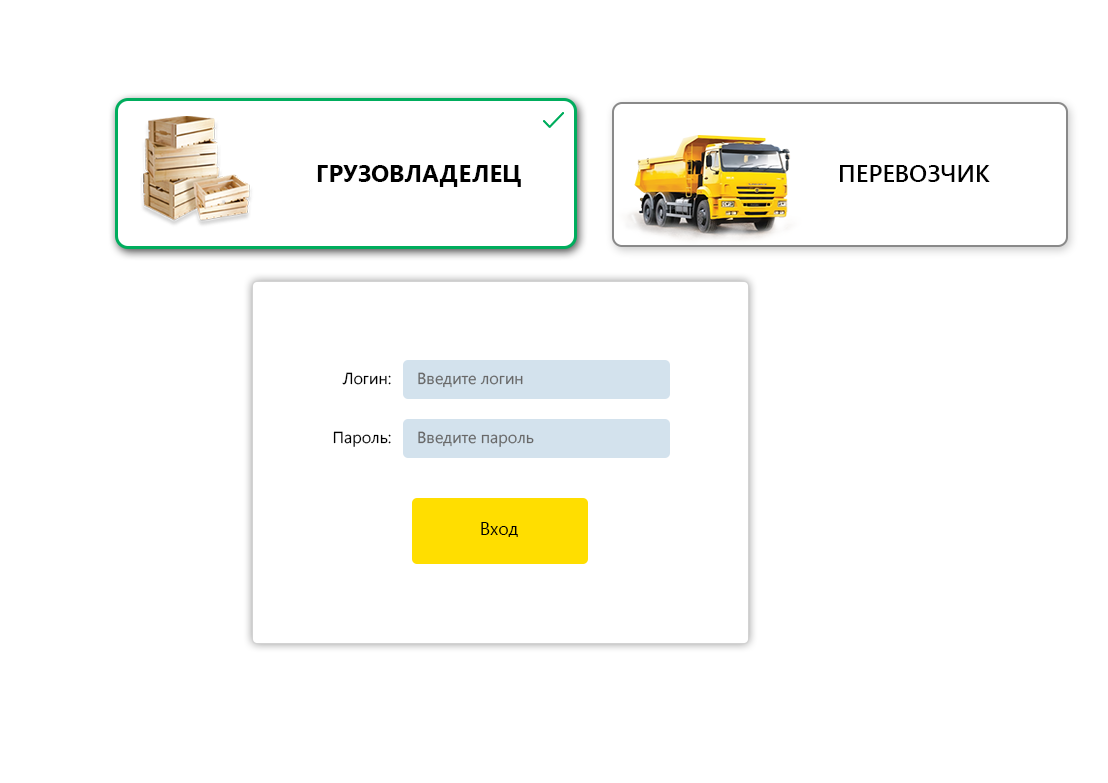
<style>
.page{position:relative;width:1108px;height:783px;background:#ffffff}
.page>*{position:absolute;margin:0}
.t1{font:24px "SegoeUI-Bold";color:#000000;text-transform:uppercase}
.t2{font:24px "SegoeUI-SemiBold";color:#000000;text-transform:uppercase}
.t3{font:16px "SegoeUI";color:#000000}
.t4{font:16px "SegoeUI";color:#686868}
.t5{font:18px "SegoeUI";color:#000000}
</style>
<div class="page">
<p class="t1" style="left:317px;top:165px;width:204px;height:22px">грузовладелец</p>
<p class="t2" style="left:840px;top:165px;width:150px;height:17px">Перевозчик</p>
<p class="t3" style="left:342px;top:372px;width:49px;height:13px">Логин:</p>
<p class="t4" style="left:418px;top:372px;width:105px;height:16px">Введите логин</p>
<p class="t3" style="left:333px;top:431px;width:58px;height:16px">Пароль:</p>
<p class="t4" style="left:418px;top:431px;width:116px;height:16px">Введите пароль</p>
<p class="t5" style="left:481px;top:522px;width:37px;height:15px">Вход</p>
</div>
